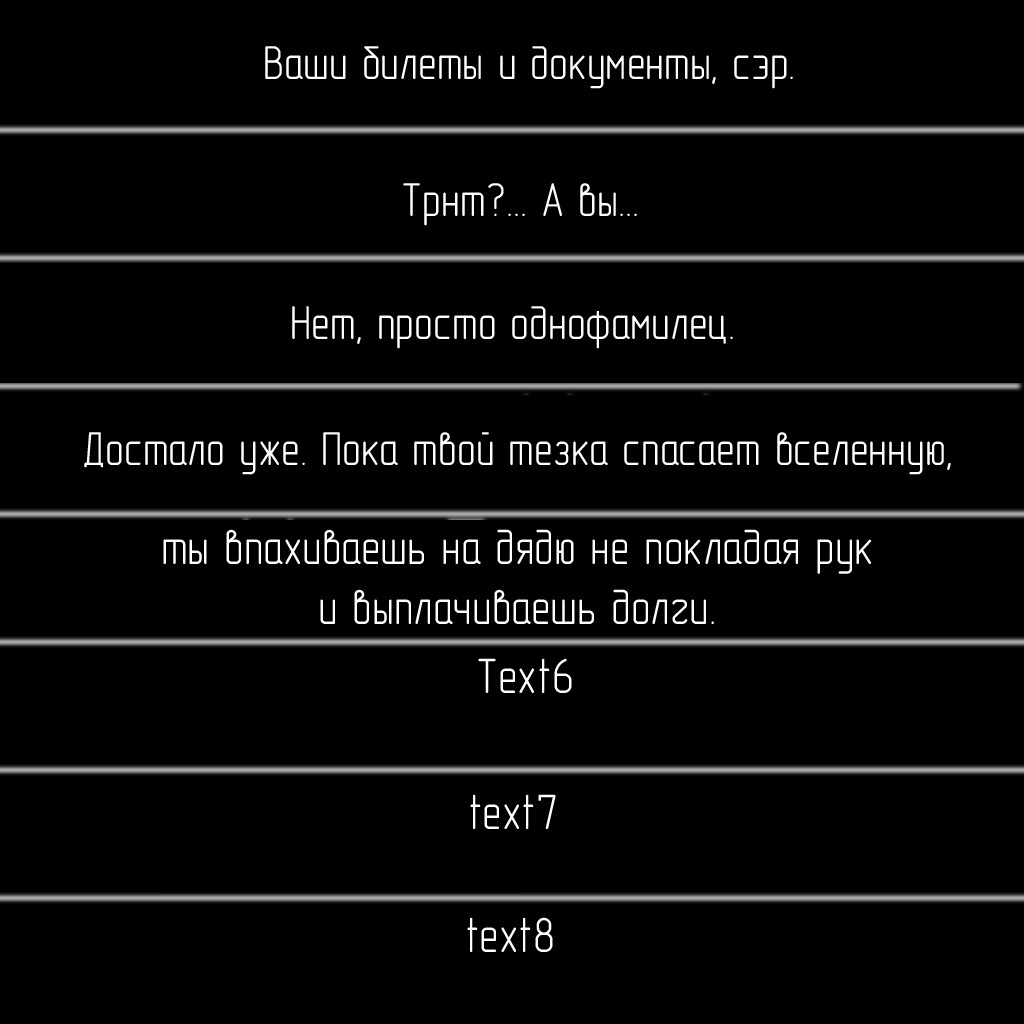
<style>
.page{position:relative;width:1024px;height:1024px;background:#000000}
.page>*{position:absolute;margin:0}
.t1{font:48px "GOST-2.304-81typeA";color:#ffffff}
.t2{font:50px "GOST-2.304-81typeA";color:#ffffff}
</style>
<div class="page">
<p class="t1" style="left:265px;top:46px;width:528px;height:43px">Ваши билеты и документы, сэр.</p>
<p class="t1" style="left:403px;top:183px;width:234px;height:43px">Трнт?... А вы...</p>
<p class="t1" style="left:292px;top:306px;width:441px;height:43px">Нет, просто однофамилец.</p>
<p class="t1" style="left:84px;top:432px;width:867px;height:43px">Достало уже. Пока твой тезка спасает вселенную,</p>
<p class="t2" style="left:163px;top:529px;width:709px;height:95px;text-align:center">ты впахиваешь на дядю не покладая рук<br>и выплачиваешь долги.</p>
<p class="t2" style="left:478px;top:658px;width:94px;height:35px">Text6</p>
<p class="t2" style="left:470px;top:794px;width:86px;height:35px">text7</p>
<p class="t2" style="left:467px;top:917px;width:86px;height:35px">text8</p>
</div>
